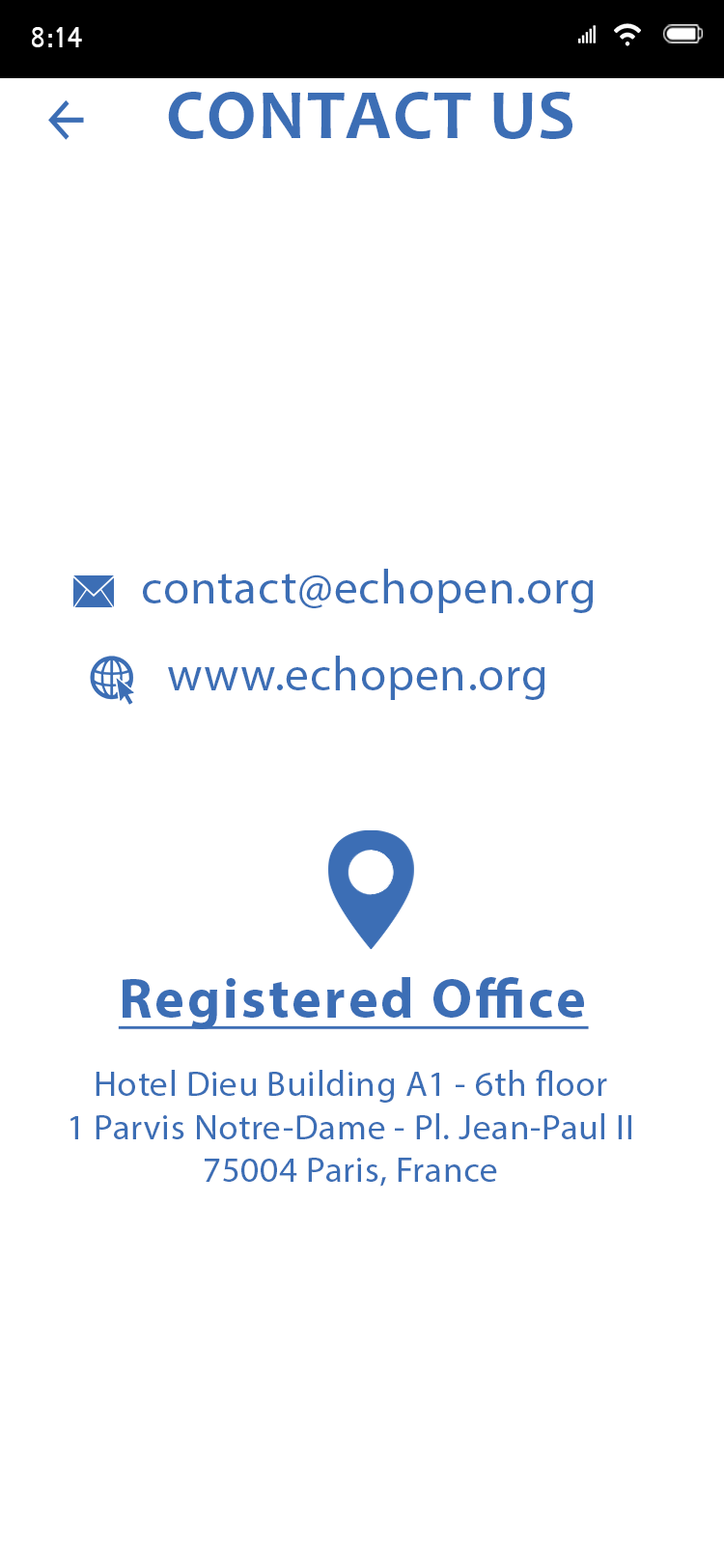
<style>
.page{position:relative;width:724px;height:1568px;background:#ffffff}
.page>*{position:absolute;margin:0}
.t1{font:31.3px "Shruti";color:#ffffff;scale:0.94 1}
.t2{font:71.5px "Candara-Bold";letter-spacing:0.02em;color:#3c6eb5;text-transform:uppercase}
.t3{font:47.7px "MyriadPro-Regular";letter-spacing:0.02em;color:#3c6eb5}
.t4{font:56.3px "MyriadPro-Bold";letter-spacing:0.05em;color:#3c6eb5;text-decoration:underline}
.t5{font:35.8px "MyriadPro-Regular";letter-spacing:0.02em;color:#3c6eb5}
</style>
<div class="page">
<p class="t1" style="left:32px;top:27px;width:50px;height:20px">8:14</p>
<p class="t2" style="left:168px;top:92px;width:405px;height:47px">Contact US</p>
<p class="t3" style="left:143px;top:569px;width:451px;height:44px">contact@echopen.org</p>
<p class="t3" style="left:168px;top:656px;width:378px;height:44px">www.echopen.org</p>
<p class="t4" style="left:118px;top:977px;width:471px;height:52px">Registered Office</p>
<p class="t5" style="left:70px;top:1070px;width:561px;height:117px;text-align:center">Hotel Dieu Building A1 - 6th floor<br>1 Parvis Notre-Dame - Pl. Jean-Paul II<br>75004 Paris, France</p>
</div>
